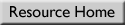
<style>
.page{position:relative;width:125px;height:25px;background:#cccccc}
.page>*{position:absolute;margin:0}
.t1{font:16px "GillSansMT";color:#000000}
</style>
<div class="page">
<p class="t1" style="left:10px;top:6px;width:105px;height:12px">Resource Home</p>
</div>
